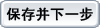
<style>
.page{position:relative;width:100px;height:28px}
.page>*{position:absolute;margin:0}
.t1{font:14px "SimHei";letter-spacing:0.04em;color:#020305;font-weight:bold}
</style>
<div class="page">
<p class="t1" style="left:6px;top:7px;width:87px;height:14px">保存并下一步</p>
</div>
